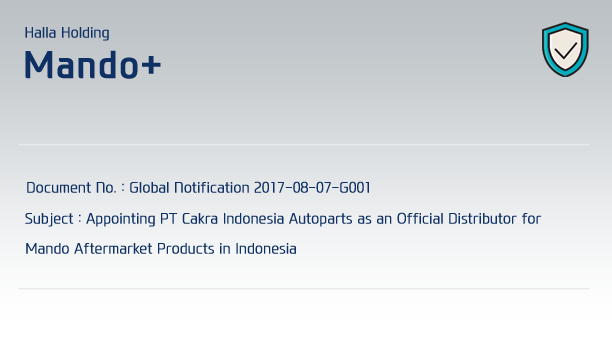
<style>
.page{position:relative;width:612px;height:360px}
.page>*{position:absolute;margin:0}
.t1{font:14px "ModernH-EcoLight";color:#0f3063;font-weight:bold}
.t2{font:36px "ModernH-Bold";color:#0f3063;font-weight:bold}
</style>
<div class="page">
<p class="t1" style="left:25px;top:27px;width:84px;height:14px">Halla Holding</p>
<p class="t2" style="left:25px;top:50px;width:136px;height:29px">Mando+</p>
<p class="t1" style="left:27px;top:181px;width:342px;height:12px">Document No. : Global Notification 2017-08-07-G001</p>
<p class="t1" style="left:25px;top:212px;width:517px;height:15px">Subject : Appointing PT Cakra Indonesia Autoparts as an Official Distributor for</p>
<p class="t1" style="left:26px;top:243px;width:270px;height:11px">Mando Aftermarket Products in Indonesia</p>
</div>
